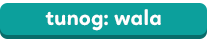
<style>
.page{position:relative;width:207px;height:40px;background:#0ca09c}
.page>*{position:absolute;margin:0}
.t1{font:22px "Linotte-Bold";color:#ffffff}
</style>
<div class="page">
<p class="t1" style="left:45px;top:9px;width:116px;height:22px">tunog: wala</p>
</div>
